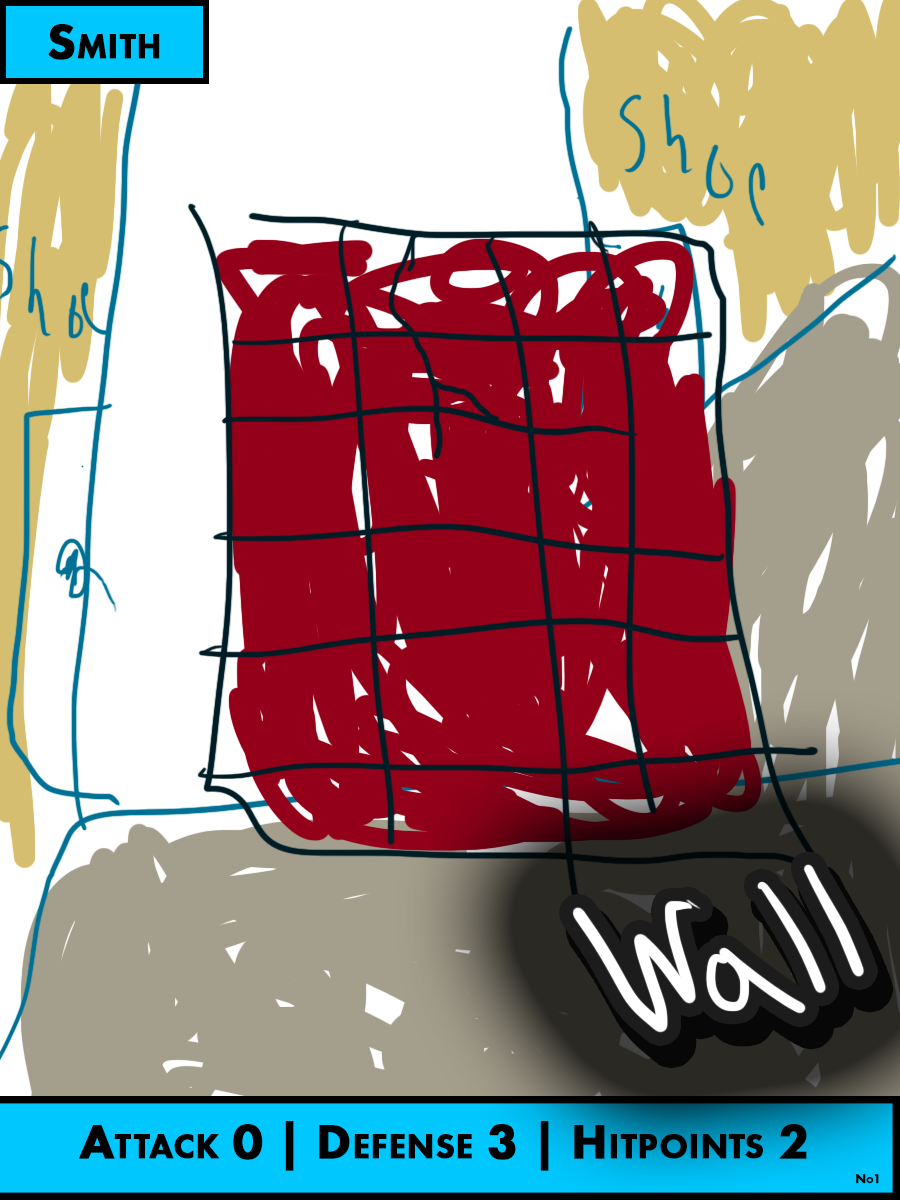
<style>
.page{position:relative;width:900px;height:1200px;background:#ffffff}
.page>*{position:absolute;margin:0}
.t1{font:50px "FuturaPT-Heavy";color:#000000;font-variant:small-caps;font-weight:bold}
.t2{font:12.5px "FuturaPT-Heavy";color:#000000;font-variant:small-caps;font-weight:bold}
</style>
<div class="page">
<p class="t1" style="left:48px;top:24px;width:112px;height:36px">Smith</p>
<p class="t1" style="left:79px;top:1121px;width:728px;height:50px">Attack 0 | Defense 3 | Hitpoints 2</p>
<p class="t2" style="left:856px;top:1174px;width:23px;height:10px">No1</p>
</div>
